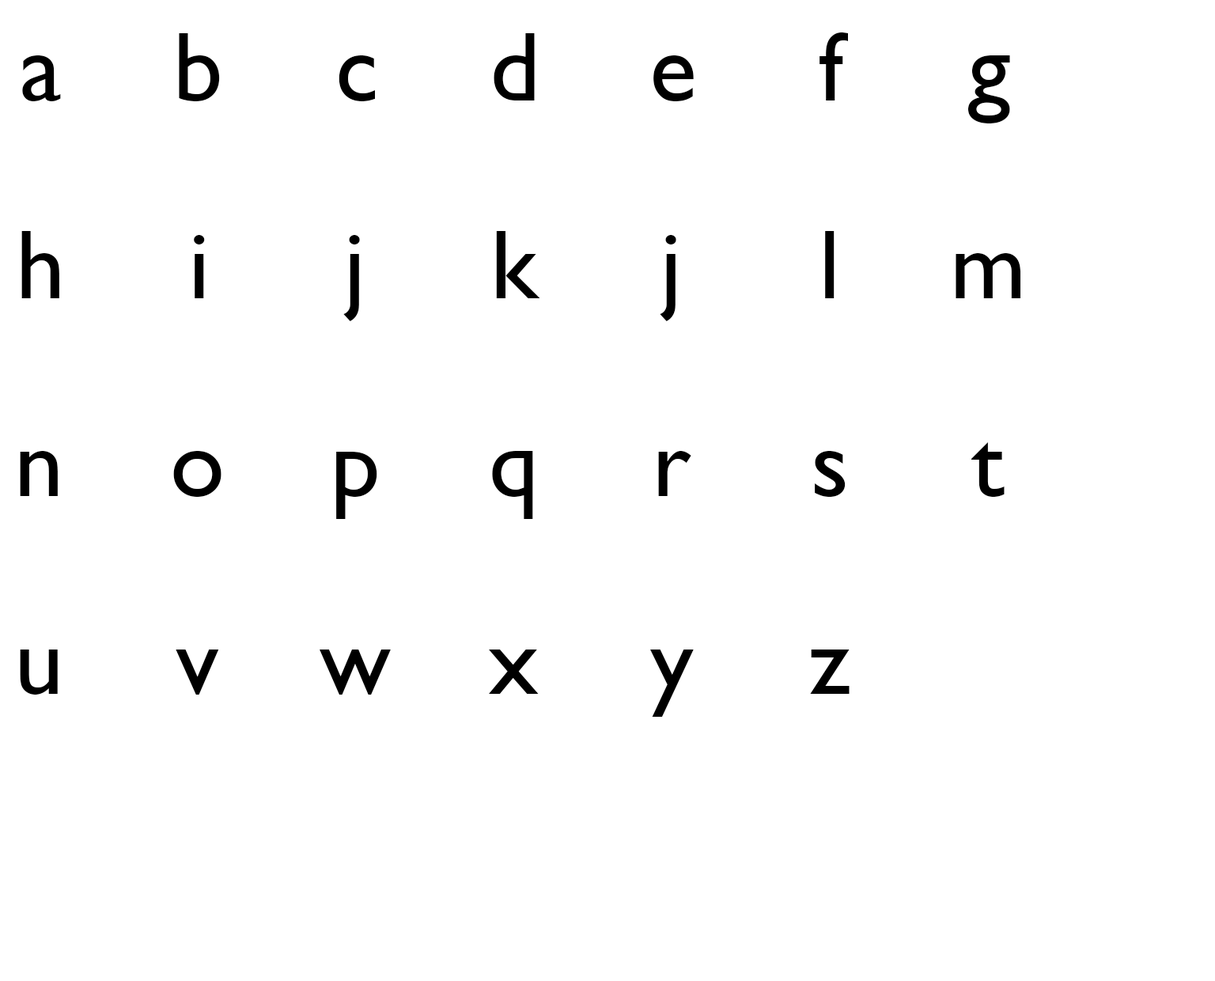
<style>
.page{position:relative;width:1215px;height:981px;background:#ffffff}
.page>*{position:absolute;margin:0}
.t1{font:98.9px "GillSans";color:#000000}
</style>
<div class="page">
<p class="t1" style="left:179px;top:33px;width:41px;height:68px">b</p>
<p class="t1" style="left:494px;top:33px;width:41px;height:67px">d</p>
<p class="t1" style="left:820px;top:32px;width:28px;height:68px">f</p>
<p class="t1" style="left:22px;top:55px;width:39px;height:46px">a</p>
<p class="t1" style="left:339px;top:55px;width:36px;height:46px">c</p>
<p class="t1" style="left:654px;top:55px;width:40px;height:46px">e</p>
<p class="t1" style="left:968px;top:55px;width:42px;height:68px">g</p>
<p class="t1" style="left:21px;top:231px;width:38px;height:67px">h</p>
<p class="t1" style="left:496px;top:231px;width:44px;height:67px">k</p>
<p class="t1" style="left:825px;top:231px;width:10px;height:67px">l</p>
<p class="t1" style="left:194px;top:235px;width:11px;height:63px">i</p>
<p class="t1" style="left:343px;top:235px;width:17px;height:86px">j</p>
<p class="t1" style="left:660px;top:235px;width:17px;height:86px">j</p>
<p class="t1" style="left:956px;top:253px;width:65px;height:45px">m</p>
<p class="t1" style="left:972px;top:442px;width:33px;height:55px">t</p>
<p class="t1" style="left:20px;top:451px;width:38px;height:45px">n</p>
<p class="t1" style="left:173px;top:451px;width:49px;height:46px">o</p>
<p class="t1" style="left:336px;top:452px;width:41px;height:67px">p</p>
<p class="t1" style="left:492px;top:451px;width:41px;height:68px">q</p>
<p class="t1" style="left:658px;top:451px;width:34px;height:45px">r</p>
<p class="t1" style="left:815px;top:451px;width:31px;height:46px">s</p>
<p class="t1" style="left:20px;top:650px;width:38px;height:45px">u</p>
<p class="t1" style="left:176px;top:650px;width:43px;height:45px">v</p>
<p class="t1" style="left:320px;top:650px;width:71px;height:45px">w</p>
<p class="t1" style="left:489px;top:650px;width:50px;height:44px">x</p>
<p class="t1" style="left:650px;top:650px;width:44px;height:67px">y</p>
<p class="t1" style="left:810px;top:650px;width:40px;height:44px">z</p>
</div>
